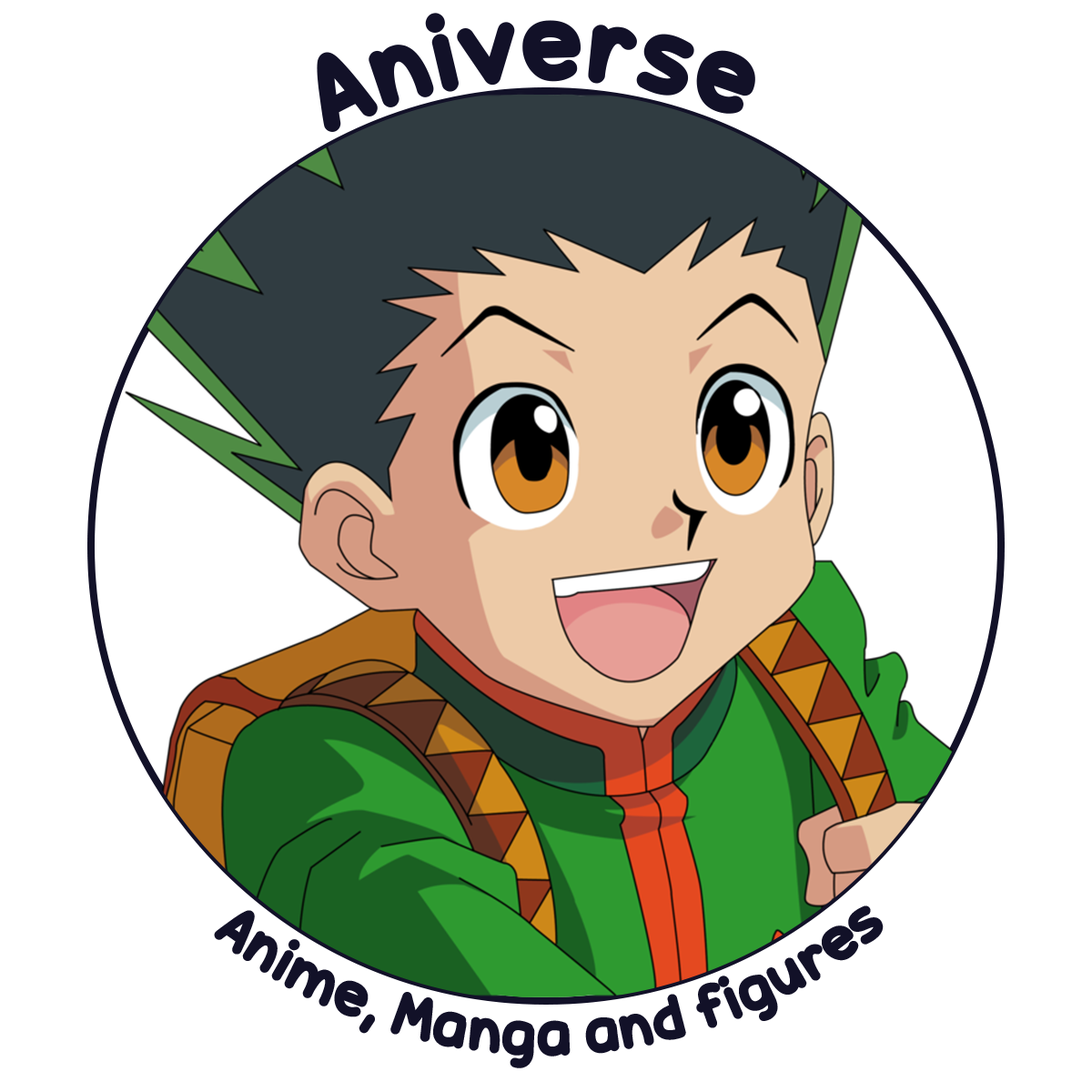
<style>
.page{position:relative;width:1092px;height:1092px;background:#ffffff}
.page>*{position:absolute;margin:0}
.t1{font:109.2px "CandyBeans";color:#121128}
.t2{font:62.7px "CandyBeans";color:#121128}
</style>
<div class="page">
<p class="t1" style="left:317px;top:13px;width:438px;height:119px;rotate:14deg">Aniverse</p>
<p class="t2" style="left:214px;top:905px;width:670px;height:163px;rotate:-11deg">Anime, Manga and figures</p>
</div>
